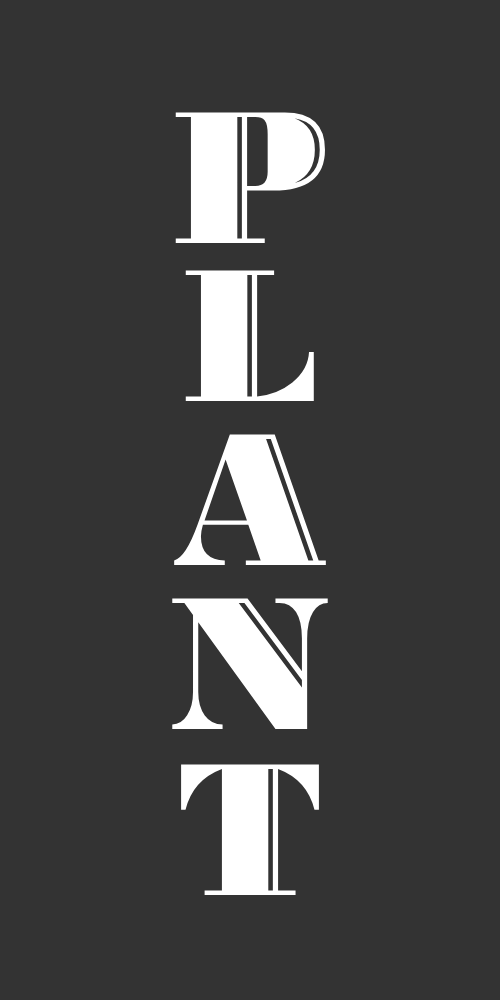
<style>
.page{position:relative;width:500px;height:1000px;background:#333333}
.page>*{position:absolute;margin:0}
.t1{font:200px "BodoniHighlightICG";color:#ffffff}
</style>
<div class="page">
<p class="t1" style="left:175px;top:112px;width:150px;height:131px">P</p>
<p class="t1" style="left:185px;top:270px;width:129px;height:131px">L</p>
<p class="t1" style="left:174px;top:434px;width:152px;height:131px">A</p>
<p class="t1" style="left:172px;top:598px;width:156px;height:131px">N</p>
<p class="t1" style="left:181px;top:764px;width:138px;height:131px">T</p>
</div>
